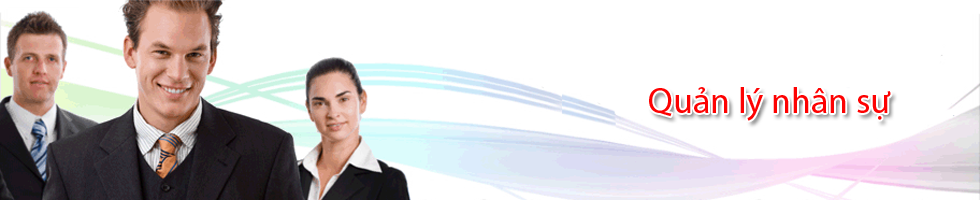
<style>
.page{position:relative;width:980px;height:200px;background:#ffffff}
.page>*{position:absolute;margin:0}
.t1{font:36px "MyriadPro-Regular";color:#fd0202}
</style>
<div class="page">
<p class="t1" style="left:649px;top:87px;width:242px;height:34px">Quản lý nhân sự</p>
</div>
